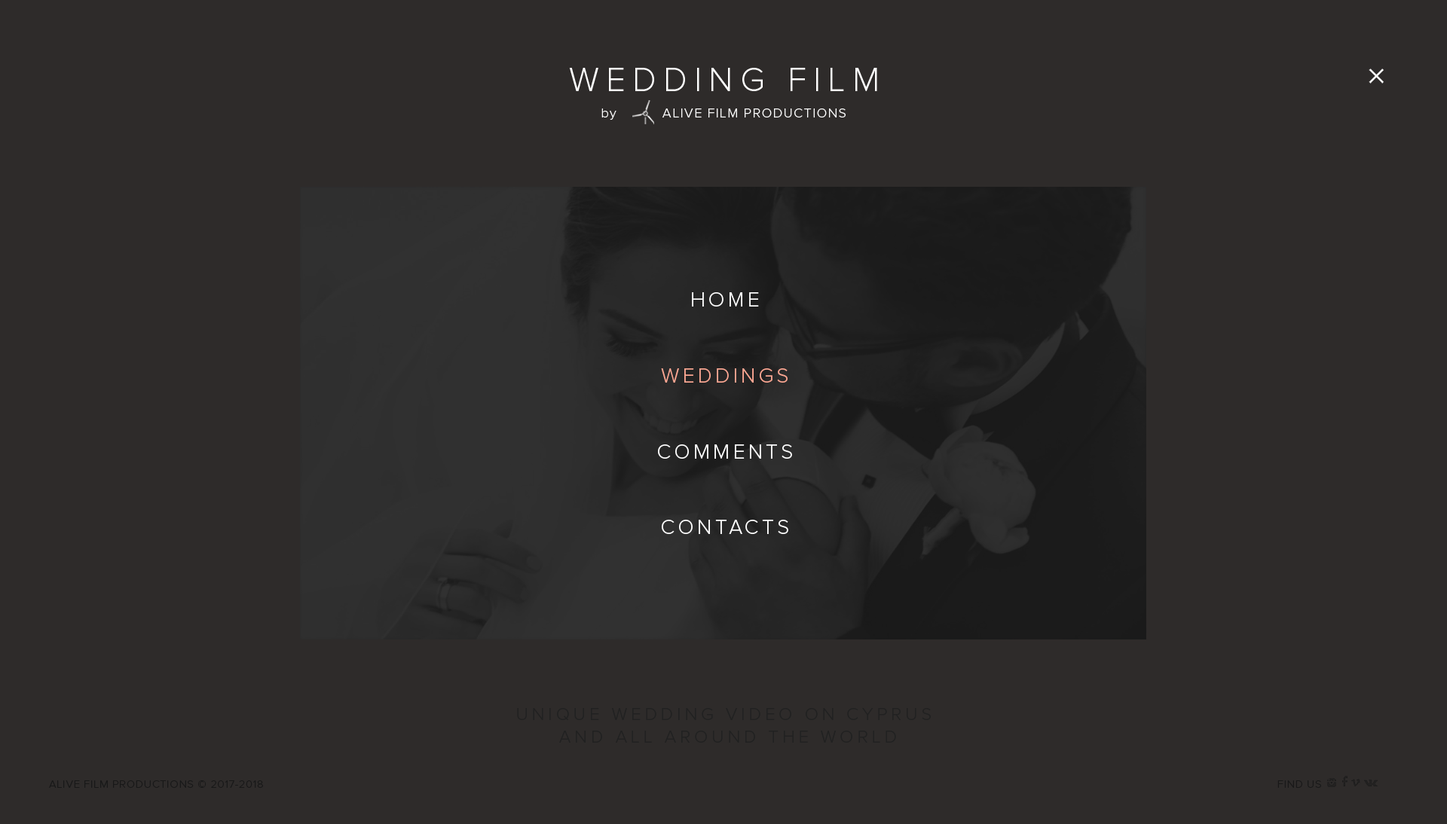
<style>
.page{position:relative;width:1447px;height:824px;background:#2e2b2a}
.page>*{position:absolute;margin:0}
.t1{font:34.7px "ProximaNova-Light";letter-spacing:0.2em;color:#ffffff;text-transform:uppercase}
.t2{font:13.6px "ProximaNova-Light";letter-spacing:0.075em;color:#ffffff}
.t3{font:21.1px "ProximaNova-Light";letter-spacing:0.15em;color:#ffffff;text-transform:uppercase}
.t4{font:21.1px "ProximaNova-Light";letter-spacing:0.15em;color:#fca692;text-transform:uppercase}
.t5{font:18.1px/22.6px "ProximaNova-Light";letter-spacing:0.2em;color:#212121;text-transform:uppercase}
.t6{font:11.1px "ProximaNova-Light";letter-spacing:0.05em;color:#000000}
.t7{font:11.1px "Tahoma";letter-spacing:0.05em;color:#000000}
</style>
<div class="page">
<p class="t1" style="left:569px;top:68px;width:308px;height:23px">Wedding FILM</p>
<p class="t2" style="left:601px;top:108px;width:244px;height:12px">by          ALIVE FILM PRODUCTIONS</p>
<p class="t3" style="left:658px;top:292px;width:134px;height:242px;text-align:center">HOME<br><br><br><span class="t4">WEDDINGS<br><br></span><br>commentS<br><br><br>contacts</p>
<p class="t5" style="left:517px;top:708px;width:414px;height:35px;text-align:center">Unique wedding video on Cyprus <br>and all around THE WORLD</p>
<p class="t6" style="left:49px;top:781px;width:214px;height:7px">ALIVE FILM PRODUCTIONS © 2017-2018</p>
<p class="t6" style="left:1277px;top:781px;width:44px;height:7px"><span class="t7">      </span>FIND US</p>
</div>
